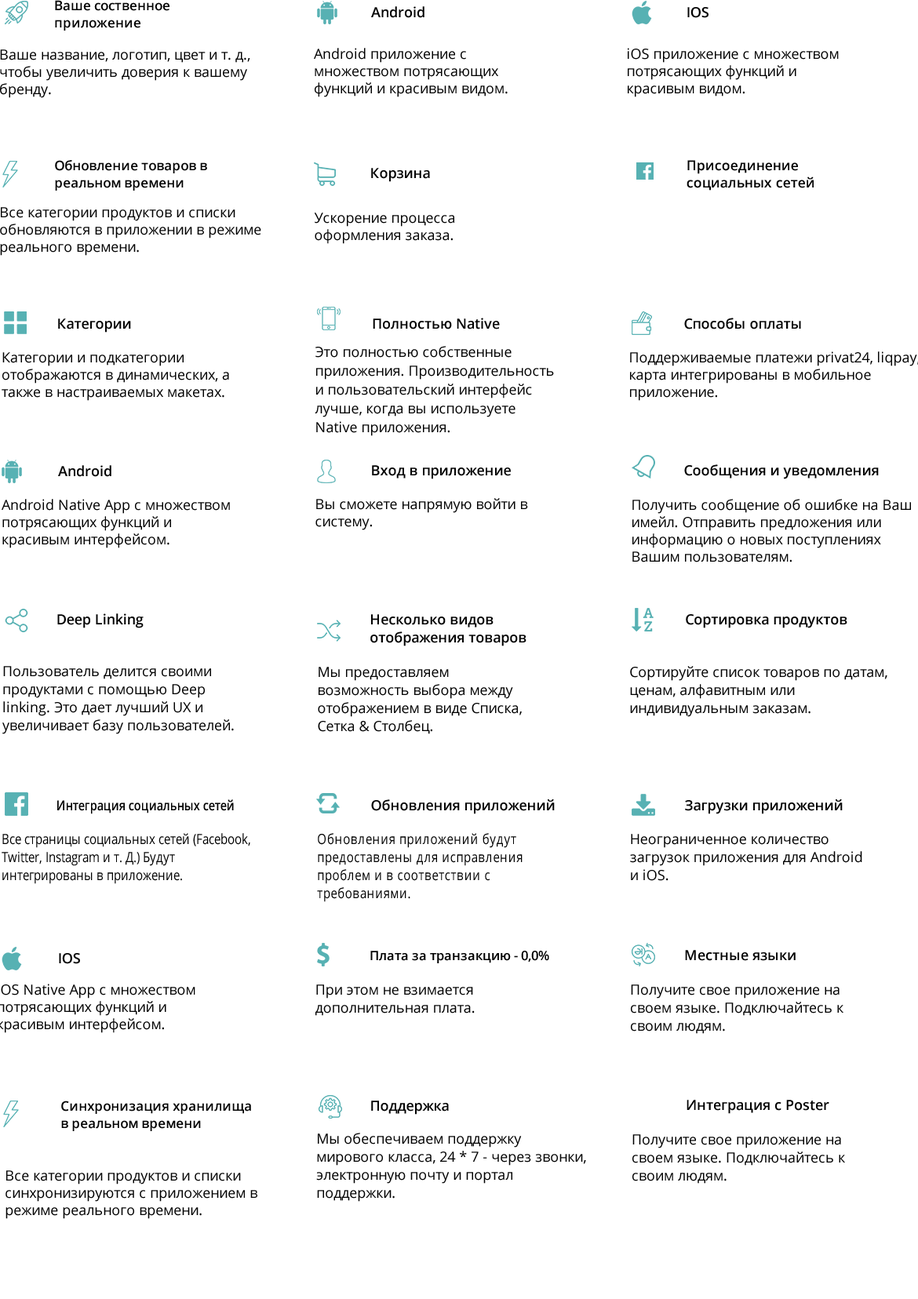
<style>
.page{position:relative;width:918px;height:1299px;background:#ffffff}
.page>*{position:absolute;margin:0}
.t1{font:13.3px/17.3px "OpenSans-SemiBold";color:#000000}
.t2{font:14.1px "OpenSans-SemiBold";color:#000000}
.t3{font:14.1px/17.3px "OpenSans";color:#000000}
.t4{font:13.7px/17.3px "OpenSans-SemiBold";color:#000000}
.t5{font:14.1px/17.3px "OpenSans-Regular";color:#000000}
.t6{font:14.1px/18.8px "OpenSans-Regular";color:#000000}
.t7{font:14.1px/18px "OpenSans-SemiBold";color:#000000}
.t8{font:14.1px/18px "OpenSans-Regular";color:#000000}
.t9{font:13.7px "OpenSans-SemiBold";color:#000000;scale:0.84 1}
.t10{font:14.1px/18px "OpenSans-Regular";color:#000000;scale:0.84 1}
.t11{font:14.1px/18px "OpenSans-Regular";letter-spacing:0.04em;color:#000000;scale:0.84 1}
.t12{font:12.9px "OpenSans-SemiBold";color:#000000}
</style>
<div class="page">
<p class="t1" style="left:55px;top:0px;width:114px;height:31px">Ваше соственное <br>приложение</p>
<p class="t2" style="left:371px;top:6px;width:53px;height:12px">Android</p>
<p class="t2" style="left:687px;top:7px;width:21px;height:11px">IOS</p>
<p class="t3" style="left:0px;top:49px;width:250px;height:49px">Ваше название, логотип, цвет и т. д., чтобы увеличить доверия к вашему бренду.</p>
<p class="t3" style="left:314px;top:48px;width:194px;height:49px">Android приложение с множеством потрясающих функций и красивым видом.</p>
<p class="t3" style="left:628px;top:48px;width:211px;height:49px">iOS приложение с множеством потрясающих функций и красивым видом.</p>
<p class="t1" style="left:55px;top:160px;width:152px;height:31px">Обновление товаров в<br>реальном времени</p>
<p class="t4" style="left:686px;top:160px;width:128px;height:31px">Присоединение <br>социальных сетей</p>
<p class="t2" style="left:371px;top:168px;width:59px;height:14px">Корзина</p>
<p class="t3" style="left:0px;top:207px;width:261px;height:49px">Все категории продуктов и списки обновляются в приложении в режиме реального времени.</p>
<p class="t3" style="left:314px;top:213px;width:140px;height:31px">Ускорение процесса оформления заказа.</p>
<p class="t2" style="left:373px;top:318px;width:127px;height:11px">Полностью Native</p>
<p class="t2" style="left:684px;top:318px;width:117px;height:11px">Способы оплаты</p>
<p class="t2" style="left:58px;top:319px;width:73px;height:14px">Категории</p>
<p class="t5" style="left:2px;top:352px;width:227px;height:49px">Категории и подкатегории отображаются в динамических, а также в настраиваемых макетах.</p>
<p class="t6" style="left:315px;top:346px;width:239px;height:90px">Это полностью собственные приложения. Производительность и пользовательский интерфейс лучше, когда вы используете Native приложения.</p>
<p class="t5" style="left:630px;top:351px;width:289px;height:50px">Поддерживаемые платежи privat24, liqpay, карта интегрированы в мобильное приложение.</p>
<p class="t2" style="left:58px;top:465px;width:53px;height:12px">Android</p>
<p class="t2" style="left:372px;top:465px;width:139px;height:14px">Вход в приложение</p>
<p class="t2" style="left:684px;top:464px;width:195px;height:15px">Сообщения и уведомления</p>
<p class="t5" style="left:2px;top:499px;width:228px;height:49px">Android Native App с множеством потрясающих функций и красивым интерфейсом.</p>
<p class="t5" style="left:315px;top:498px;width:213px;height:32px">Вы сможете напрямую войти в систему.</p>
<p class="t5" style="left:632px;top:499px;width:279px;height:63px">Получить сообщение об ошибке на Ваш имейл. Отправить предложения или информацию о новых поступлениях Вашим пользователям.</p>
<p class="t2" style="left:57px;top:613px;width:87px;height:15px">Deep Linking</p>
<p class="t7" style="left:370px;top:614px;width:156px;height:32px">Несколько видов <br>отображения товаров</p>
<p class="t2" style="left:686px;top:614px;width:161px;height:14px">Сортировка продуктов</p>
<p class="t8" style="left:2px;top:666px;width:232px;height:68px">Пользователь делится своими продуктами с помощью Deep linking. Это дает лучший UX и увеличивает базу пользователей.</p>
<p class="t8" style="left:318px;top:667px;width:204px;height:67px">Мы предоставляем возможность выбора между отображением в виде Списка, Сетка &amp; Столбец.</p>
<p class="t8" style="left:630px;top:666px;width:257px;height:51px">Сортируйте список товаров по датам, ценам, алфавитным или индивидуальным заказам.</p>
<p class="t9" style="left:57px;top:799px;width:177px;height:15px">Интеграция социальных сетей</p>
<p class="t2" style="left:371px;top:799px;width:184px;height:15px">Обновления приложений</p>
<p class="t2" style="left:685px;top:799px;width:158px;height:15px">Загрузки приложений</p>
<p class="t10" style="left:2px;top:833px;width:248px;height:51px">Все страницы социальных сетей (Facebook, Twitter, Instagram и т. Д.) Будут интегрированы в приложение.</p>
<p class="t11" style="left:317px;top:833px;width:205px;height:69px">Обновления приложений будут предоставлены для исправления проблем и в соответствии с требованиями.</p>
<p class="t8" style="left:630px;top:834px;width:232px;height:47px">Неограниченное количество загрузок приложения для Android и iOS.</p>
<p class="t2" style="left:59px;top:953px;width:21px;height:11px">IOS</p>
<p class="t12" style="left:370px;top:951px;width:179px;height:12px">Плата за транзакцию - 0,0%</p>
<p class="t2" style="left:685px;top:950px;width:110px;height:11px">Местные языки</p>
<p class="t8" style="left:315px;top:985px;width:160px;height:31px">При этом не взимается дополнительная плата.</p>
<p class="t8" style="left:631px;top:985px;width:212px;height:49px">Получите свое приложение на своем языке. Подключайтесь к своим людям.</p>
<p class="t1" style="left:61px;top:1101px;width:190px;height:30px">Синхронизация хранилища<br>в реальном времени</p>
<p class="t2" style="left:371px;top:1101px;width:78px;height:14px">Поддержка</p>
<p class="t2" style="left:686px;top:1100px;width:143px;height:14px">Интеграция с Poster</p>
<p class="t8" style="left:316px;top:1133px;width:270px;height:69px">Мы обеспечиваем поддержку мирового класса, 24 * 7 - через звонки, электронную почту и портал поддержки.</p>
<p class="t8" style="left:632px;top:1134px;width:213px;height:50px">Получите свое приложение на своем языке. Подключайтесь к своим людям.</p>
<p class="t5" style="left:5px;top:1170px;width:252px;height:49px">Все категории продуктов и списки синхронизируются с приложением в режиме реального времени.</p>
</div>
